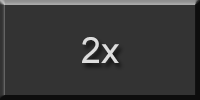
<style>
.page{position:relative;width:200px;height:100px;background:#333333}
.page>*{position:absolute;margin:0}
.t1{font:36px "ArialMT";color:#dddddd}
</style>
<div class="page">
<p class="t1" style="left:82px;top:37px;width:37px;height:26px">2x</p>
</div>
